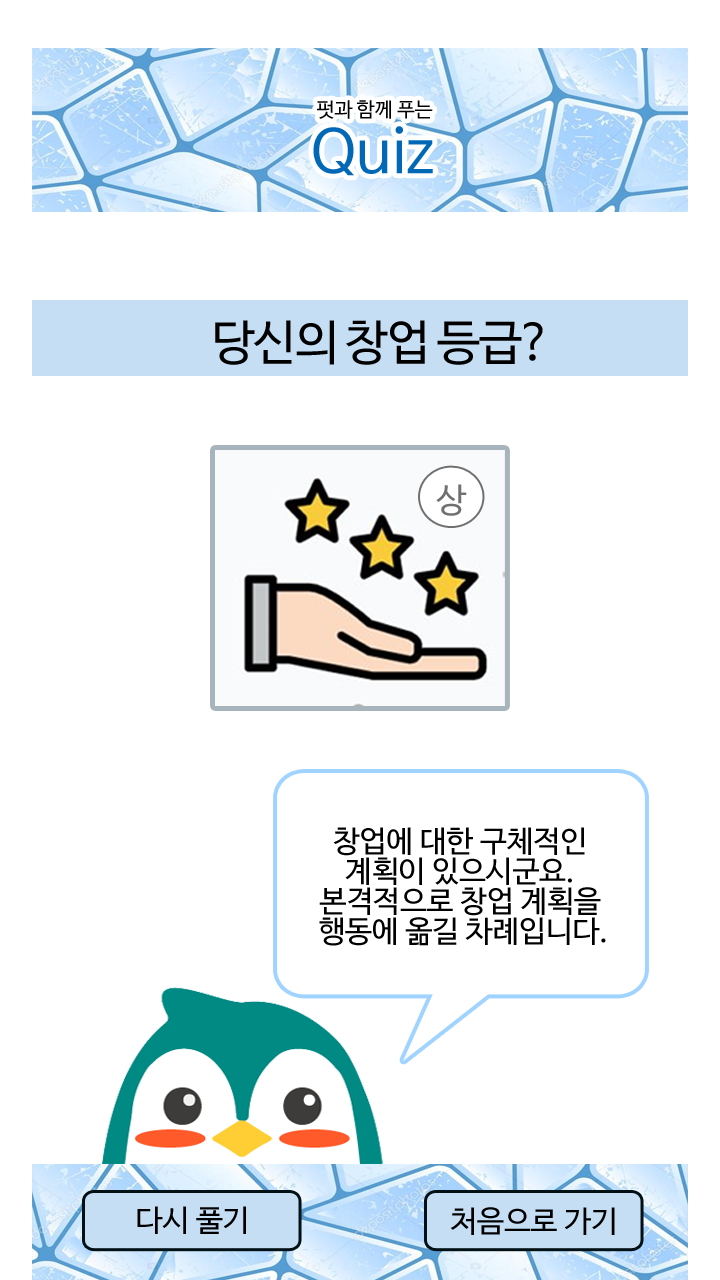
<style>
.page{position:relative;width:720px;height:1280px;background:#ffffff}
.page>*{position:absolute;margin:0}
.t1{font:20px/24px "NanumBarunGothic";color:#000000}
.t2{font:20px/26px "NanumBarunGothic";color:#000000}
.t3{font:60px/24px "NanumBarunGothic";color:#0068b7}
.t4{font:48px "NanumBarunGothic";letter-spacing:-0.03em;color:#000000}
.t5{font:34px "NanumBarunGothic";color:#707070}
.t6{font:30px/30px "NanumBarunGothic";color:#000000}
.t7{font:30px "NanumBarunGothic";color:#000000}
</style>
<div class="page">
<p class="t1" style="left:313px;top:100px;width:120px;height:76px;text-align:center"><span class="t2">  </span>펏과 함께 푸는 <br><span class="t3">Quiz</span></p>
<p class="t4" style="left:215px;top:320px;width:328px;height:45px">당신의 창업 등급?</p>
<p class="t5" style="left:436px;top:484px;width:31px;height:32px">상</p>
<p class="t6" style="left:319px;top:827px;width:287px;height:119px;text-align:center">창업에 대한 구체적인 <br>계획이 있으시군요. <br>본격적으로 창업 계획을 <br>행동에 옮길 차례입니다.</p>
<p class="t7" style="left:137px;top:1206px;width:109px;height:28px">다시 풀기</p>
<p class="t7" style="left:450px;top:1207px;width:165px;height:28px">처음으로 가기</p>
</div>
